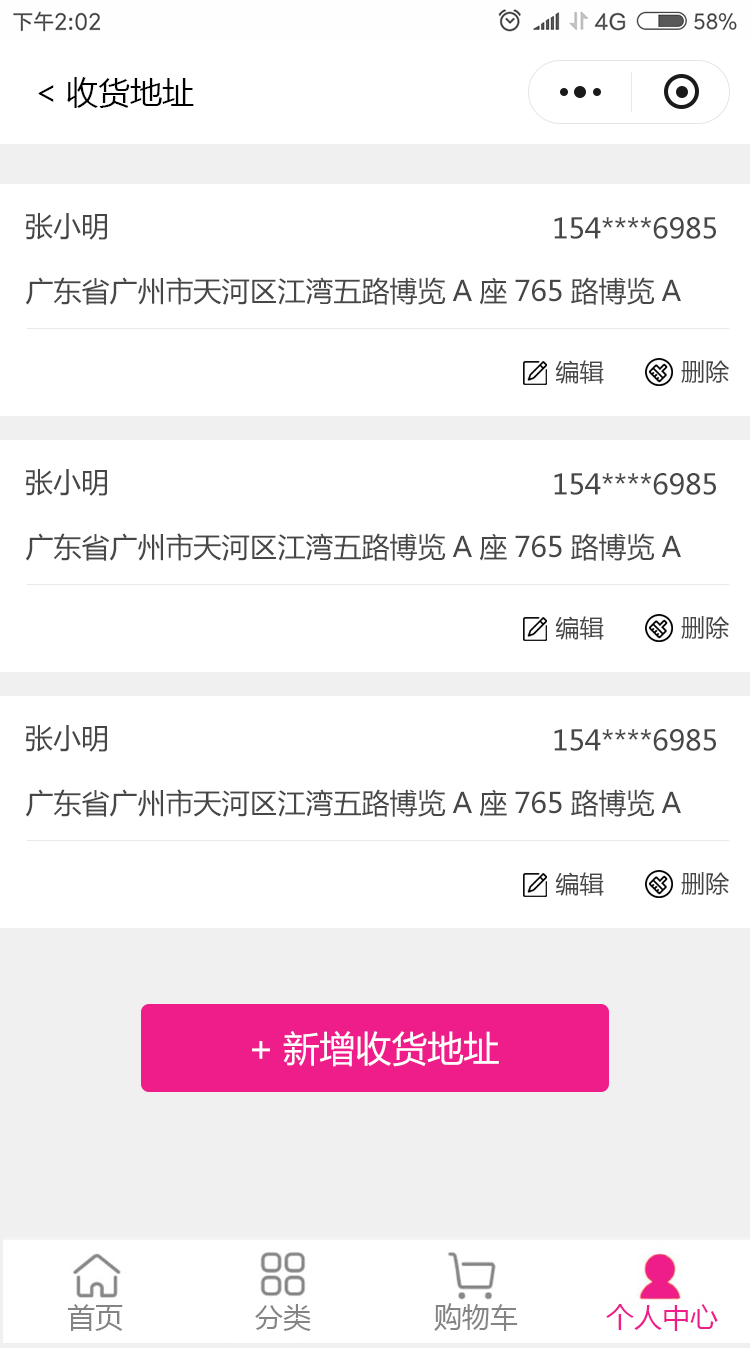
<style>
.page{position:relative;width:750px;height:1348px;background:#ffffff}
.page>*{position:absolute;margin:0}
.t1{font:32px "MicrosoftYaHei";color:#000000}
.t2{font:28px "MicrosoftYaHei";color:#474747}
.t3{font:24px "MicrosoftYaHei";color:#474747}
.t4{font:36px "MicrosoftYaHei";color:#ffffff}
</style>
<div class="page">
<p class="t1" style="left:38px;top:77px;width:156px;height:31px">&lt;收货地址</p>
<p class="t2" style="left:26px;top:213px;width:81px;height:27px">张小明</p>
<p class="t2" style="left:554px;top:217px;width:162px;height:22px">154****6985</p>
<p class="t2" style="left:25px;top:277px;width:656px;height:28px">广东省广州市天河区江湾五路博览A座765路博览A</p>
<p class="t3" style="left:555px;top:360px;width:49px;height:24px">编辑</p>
<p class="t3" style="left:681px;top:360px;width:48px;height:23px">删除</p>
<p class="t2" style="left:26px;top:469px;width:81px;height:27px">张小明</p>
<p class="t2" style="left:554px;top:473px;width:162px;height:22px">154****6985</p>
<p class="t2" style="left:25px;top:533px;width:656px;height:28px">广东省广州市天河区江湾五路博览A座765路博览A</p>
<p class="t3" style="left:555px;top:616px;width:49px;height:24px">编辑</p>
<p class="t3" style="left:681px;top:616px;width:48px;height:23px">删除</p>
<p class="t2" style="left:26px;top:725px;width:81px;height:27px">张小明</p>
<p class="t2" style="left:554px;top:729px;width:162px;height:22px">154****6985</p>
<p class="t2" style="left:25px;top:789px;width:656px;height:28px">广东省广州市天河区江湾五路博览A座765路博览A</p>
<p class="t3" style="left:555px;top:872px;width:49px;height:24px">编辑</p>
<p class="t3" style="left:681px;top:872px;width:48px;height:23px">删除</p>
<p class="t4" style="left:252px;top:1031px;width:247px;height:36px">+新增收货地址</p>
</div>
